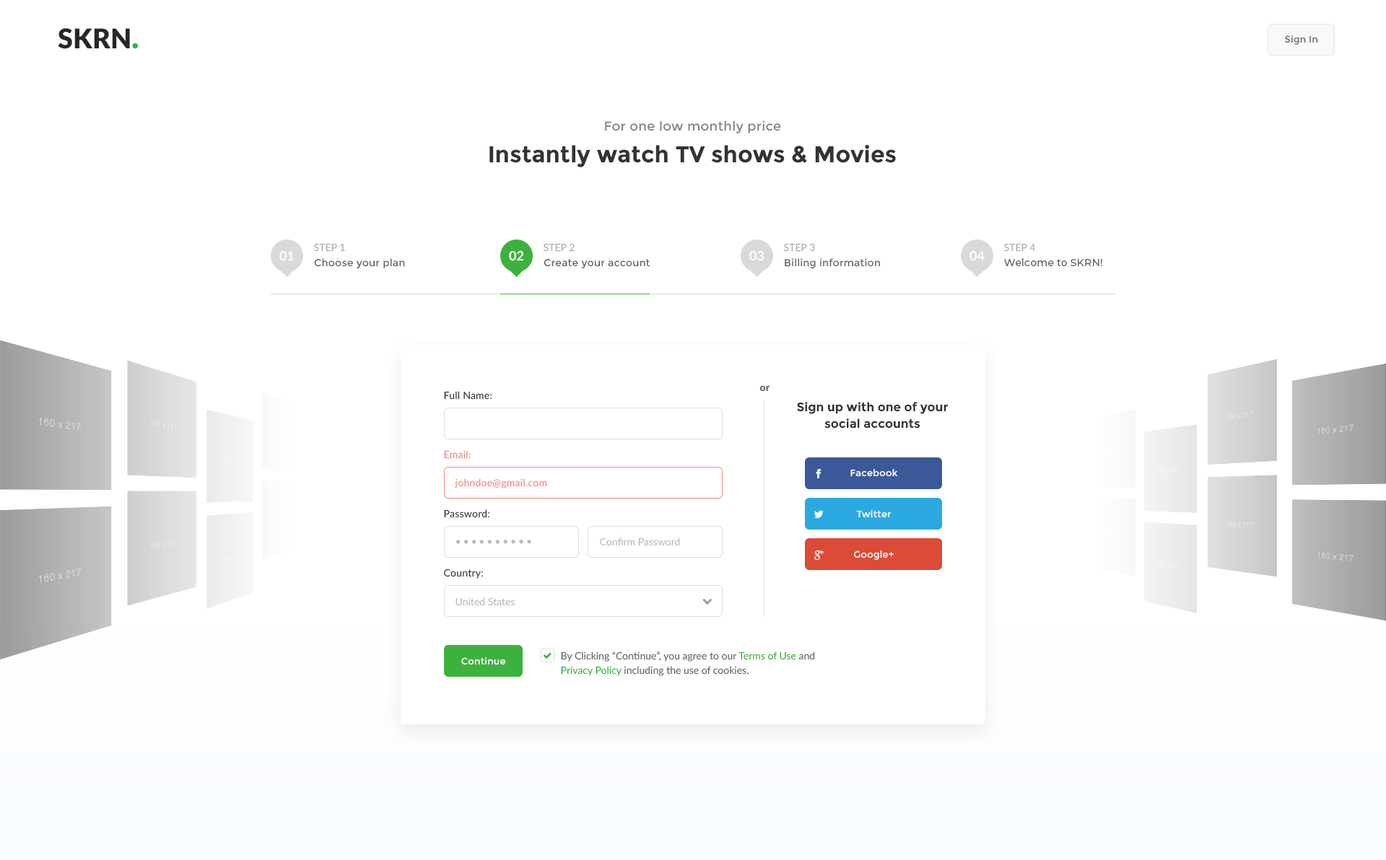
<style>
.page{position:relative;width:1386px;height:860px;background:#ffffff}
.page>*{position:absolute;margin:0}
.t1{font:27.2px "Lato-Black";color:#272727}
.t2{font:31.8px "Lato-Black";color:#3db13d}
.t3{font:9.4px "Montserrat-Regular";letter-spacing:0.02em;color:#666666}
.t4{font:13px "Montserrat-Regular";letter-spacing:0.017em;color:#848484}
.t5{font:23.1px "Montserrat-Bold";color:#333333}
.t6{font:10.1px "Lato-Regular";color:#adadad}
.t7{font:13px "Lato-Bold";color:#ffffff;text-transform:uppercase}
.t8{font:10.1px "Montserrat-Regular";letter-spacing:0.015em;color:#666666}
.t9{font:10.1px "Montserrat-Medium";letter-spacing:0.015em;color:#666666}
.t10{font:10.1px "Lato-Black";color:#666666}
.t11{font:10.1px "Lato-Regular";letter-spacing:0.017em;color:#333333}
.t12{font:12.3px/16.6px "Montserrat-Bold";color:#333333}
.t13{font:10.1px "Lato-Regular";letter-spacing:0.017em;color:#ff8585}
.t14{font:9.4px "Montserrat-Regular";letter-spacing:0.02em;color:#ffffff}
.t15{font:10.1px "Lato-Regular";letter-spacing:0.2em;color:#bcbcbc}
.t16{font:10.1px "Lato-Regular";color:#bcbcbc}
.t17{font:10.1px/14.4px "Lato-Regular";color:#666666}
.t18{font:10.1px/14.4px "Lato-Regular";color:#3db13d}
</style>
<div class="page">
<p class="t1" style="left:58px;top:28px;width:81px;height:21px">SKRN<span class="t2">.</span></p>
<p class="t3" style="left:1285px;top:35px;width:33px;height:10px">Sign In</p>
<p class="t4" style="left:605px;top:121px;width:176px;height:13px">For one low monthly price</p>
<p class="t5" style="left:489px;top:144px;width:407px;height:23px">Instantly watch TV shows &amp; Movies</p>
<p class="t6" style="left:313px;top:243px;width:32px;height:9px">STEP 1</p>
<p class="t6" style="left:543px;top:243px;width:32px;height:9px">STEP 2</p>
<p class="t6" style="left:783px;top:243px;width:32px;height:9px">STEP 3</p>
<p class="t6" style="left:1003px;top:243px;width:33px;height:9px">STEP 4</p>
<p class="t7" style="left:279px;top:250px;width:15px;height:11px">01</p>
<p class="t7" style="left:509px;top:250px;width:14px;height:11px">02</p>
<p class="t7" style="left:749px;top:250px;width:15px;height:11px">03</p>
<p class="t7" style="left:969px;top:250px;width:16px;height:11px">04</p>
<p class="t8" style="left:314px;top:258px;width:91px;height:11px">Choose your plan</p>
<p class="t8" style="left:544px;top:258px;width:106px;height:11px">Create your account</p>
<p class="t8" style="left:785px;top:258px;width:96px;height:11px">Billing information</p>
<p class="t9" style="left:1004px;top:258px;width:98px;height:8px">Welcome to SKRN!</p>
<p class="t10" style="left:759px;top:385px;width:10px;height:6px">or</p>
<p class="t11" style="left:444px;top:391px;width:48px;height:9px">Full Name:</p>
<p class="t12" style="left:797px;top:402px;width:151px;height:27px;text-align:center">Sign up with one of your<br>social accounts</p>
<p class="t13" style="left:444px;top:450px;width:27px;height:9px">Email:</p>
<p class="t14" style="left:850px;top:469px;width:48px;height:8px">Facebook</p>
<p class="t13" style="left:454px;top:479px;width:93px;height:10px">johndoe@gmail.com</p>
<p class="t11" style="left:444px;top:510px;width:45px;height:8px">Password:</p>
<p class="t14" style="left:856px;top:510px;width:35px;height:8px">Twitter</p>
<p class="t15" style="left:455px;top:540px;width:76px;height:4px">••••••••••</p>
<p class="t16" style="left:600px;top:538px;width:80px;height:8px">Confirm Password</p>
<p class="t14" style="left:854px;top:551px;width:40px;height:9px">Google+</p>
<p class="t11" style="left:444px;top:569px;width:39px;height:10px">Country:</p>
<p class="t16" style="left:455px;top:598px;width:60px;height:8px">United States</p>
<p class="t17" style="left:561px;top:652px;width:254px;height:24px">By Clicking “Continue”, you agree to our <span class="t18">Terms of Use</span> and <br><span class="t18">Privacy Policy</span> including the use of cookies.</p>
<p class="t14" style="left:461px;top:658px;width:45px;height:8px">Continue</p>
</div>
